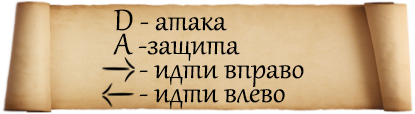
<style>
.page{position:relative;width:415px;height:114px}
.page>*{position:absolute;margin:0}
.t1{font:36px/24px "Gabriola";color:#000000}
</style>
<div class="page">
<p class="t1" style="left:113px;top:9px;width:191px;height:100px">D - атака<br>A -защита<br>    - идти вправо<br>    - идти влево</p>
</div>
